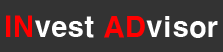
<style>
.page{position:relative;width:223px;height:52px;background:#333333}
.page>*{position:absolute;margin:0}
.t1{font:27.9px "H2gtrE";letter-spacing:-0.03em;color:#ffffff}
.t2{font:27.9px "H2gtrE";letter-spacing:-0.03em;color:#ff0000}
</style>
<div class="page">
<p class="t1" style="left:6px;top:15px;width:212px;height:23px"><span class="t2">IN</span>vest <span class="t2">AD</span>visor</p>
</div>
